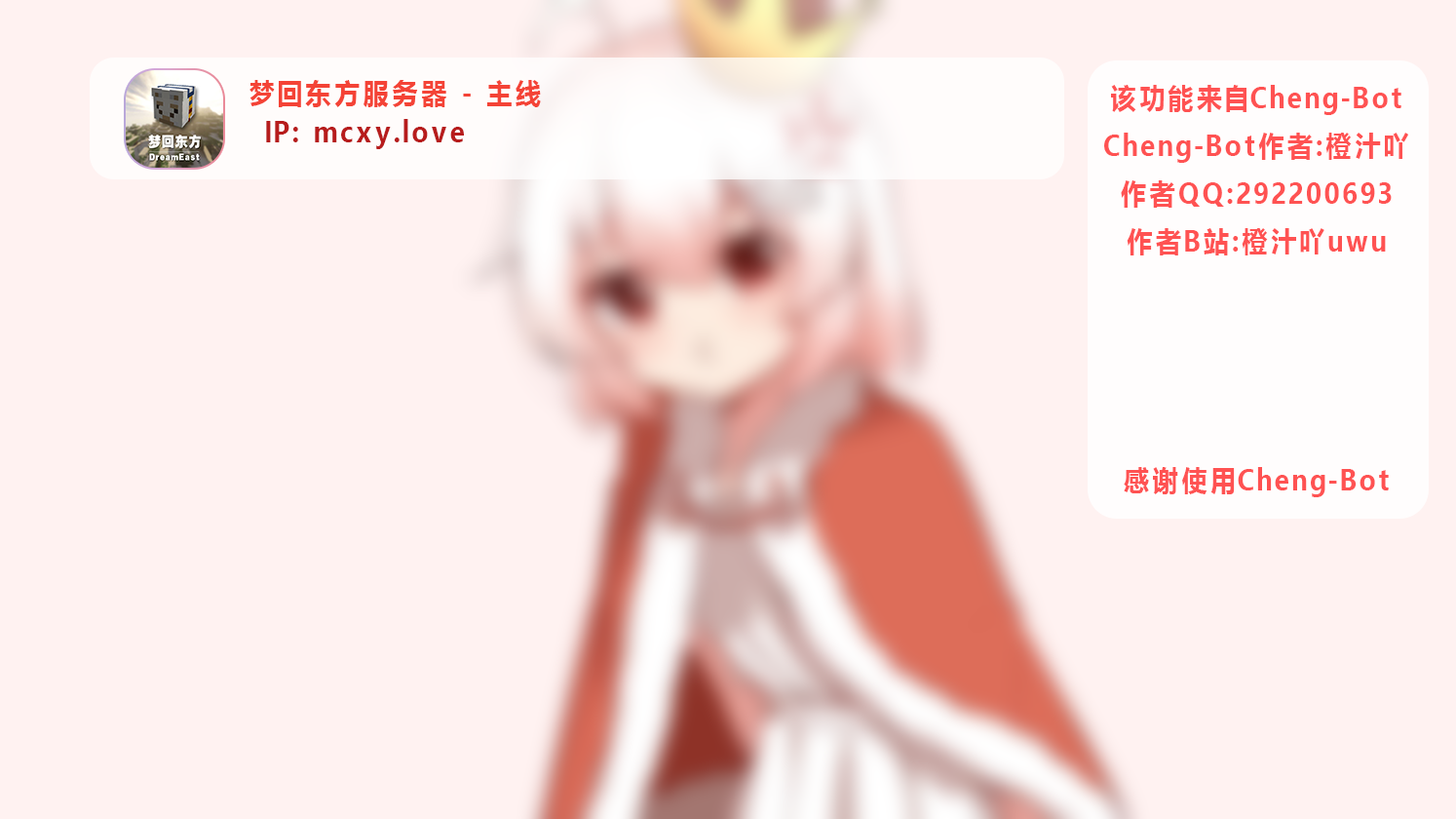
<style>
.page{position:relative;width:1456px;height:819px;background:#fff2f1}
.page>*{position:absolute;margin:0}
.t1{font:28.1px "MicrosoftYaHei-Bold";letter-spacing:0.17em;color:#f44336;scale:0.92 1}
.t2{font:28.1px/47.8px "MicrosoftYaHei-Bold";letter-spacing:0.17em;color:#ff5252;scale:0.92 1}
.t3{font:28.1px "MicrosoftYaHei-Bold";letter-spacing:0.17em;color:#b71c1c;scale:0.92 1}
</style>
<div class="page">
<p class="t1" style="left:250px;top:80px;width:291px;height:27px">梦回东方服务器 - 主线</p>
<p class="t2" style="left:1104px;top:85px;width:305px;height:412px;text-align:center">该功能来自Cheng-Bot<br>Cheng-Bot作者:橙汁吖<br>作者QQ:292200693<br>作者B站:橙汁吖uwu<br><br><br><br><br>感谢使用Cheng-Bot</p>
<p class="t3" style="left:266px;top:119px;width:198px;height:30px">IP: mcxy.love</p>
</div>
